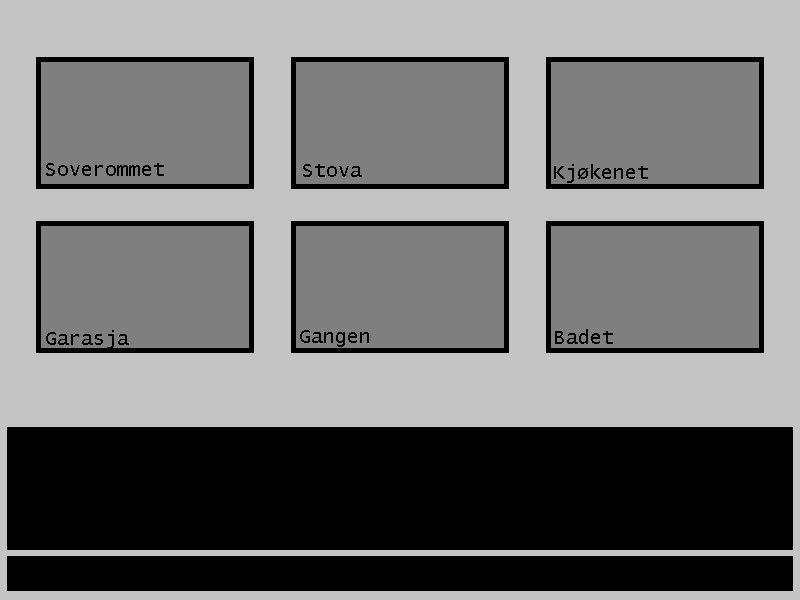
<style>
.page{position:relative;width:800px;height:600px;background:#c3c3c3}
.page>*{position:absolute;margin:0}
.t1{font:20px "LucidaConsole";color:#000000}
.t2{font:12px "LucidaConsole";color:#000000}
</style>
<div class="page">
<p class="t1" style="left:46px;top:163px;width:118px;height:13px">Soverommet</p>
<p class="t2" style="left:303px;top:164px;width:59px;height:13px">Stova</p>
<p class="t2" style="left:554px;top:164px;width:94px;height:19px">Kjøkenet</p>
<p class="t2" style="left:555px;top:329px;width:58px;height:15px">Badet</p>
<p class="t2" style="left:46px;top:330px;width:83px;height:19px">Garasja</p>
<p class="t2" style="left:300px;top:330px;width:69px;height:17px">Gangen</p>
</div>
